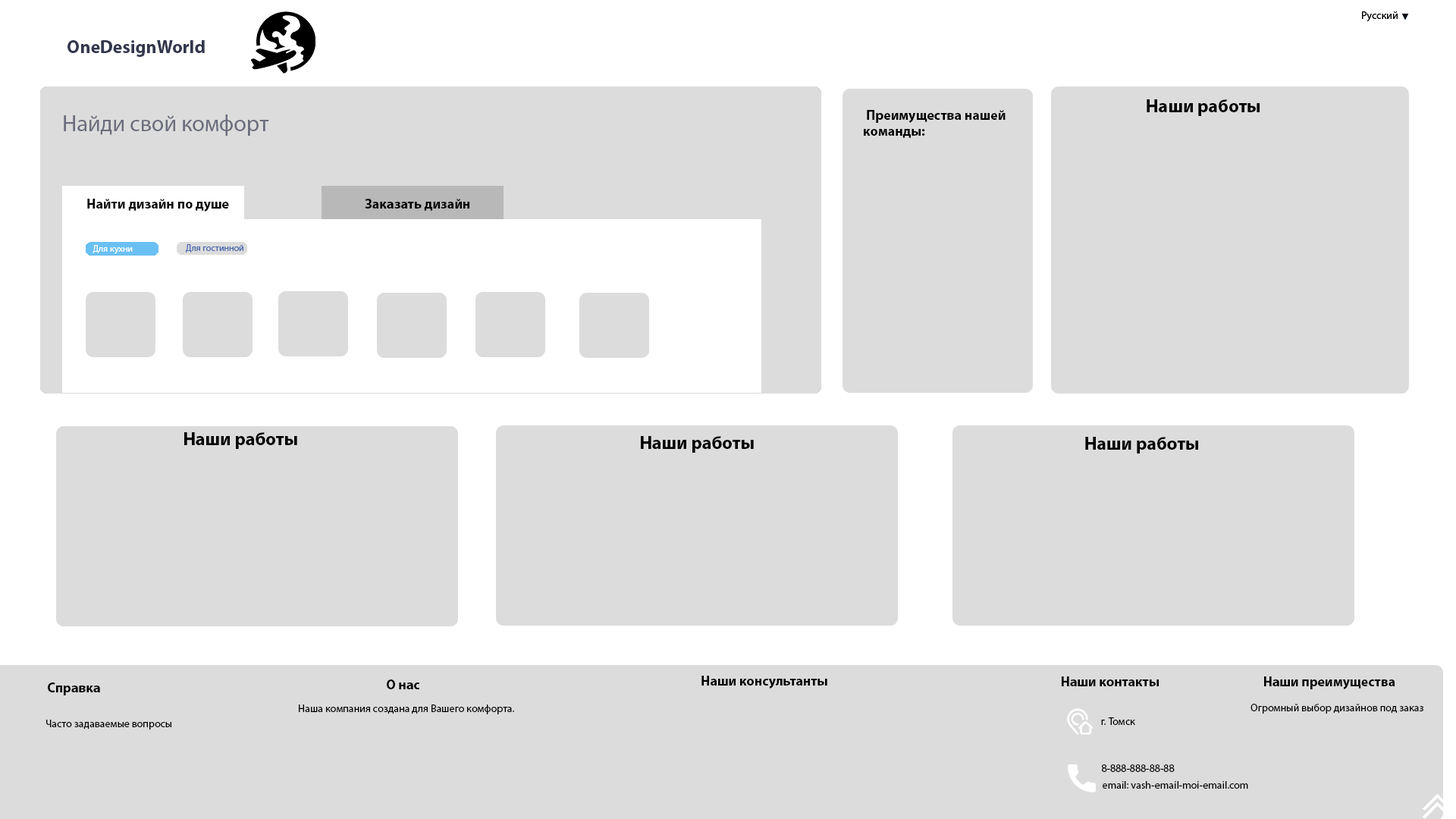
<style>
.page{position:relative;width:1456px;height:819px;background:#dcdcdc}
.page>*{position:absolute;margin:0}
.t1{font:18.2px "MyriadPro-Bold";color:#33374d}
.t2{font:18.2px "MyriadPro-Bold";color:#000000}
.t3{font:13.6px "MyriadPro-Bold";color:#000000}
.t4{font:22.7px "MyriadPro-Regular";color:#6a6d7c}
.t5{font:9.1px "MyriadPro-Regular";color:#ffffff}
.t6{font:9.1px "MyriadPro-Regular";color:#4d67ac}
.t7{font:10.6px "MyriadPro-Regular";color:#000000}
</style>
<div class="page">
<p class="t1" style="left:67px;top:40px;width:138px;height:17px">OneDesignWorld</p>
<p class="t2" style="left:1147px;top:99px;width:113px;height:17px">Наши работы</p>
<p class="t3" style="left:864px;top:110px;width:142px;height:28px">Преимущества нашей<br>команды:</p>
<p class="t4" style="left:64px;top:115px;width:205px;height:21px">Найди свой комфорт</p>
<p class="t3" style="left:87px;top:199px;width:142px;height:13px">Найти дизайн по душе</p>
<p class="t3" style="left:365px;top:199px;width:104px;height:12px">Заказать дизайн</p>
<p class="t5" style="left:93px;top:245px;width:40px;height:9px">Для кухни</p>
<p class="t6" style="left:186px;top:244px;width:57px;height:9px">Для гостинной</p>
<p class="t2" style="left:184px;top:432px;width:113px;height:17px">Наши работы</p>
<p class="t2" style="left:641px;top:436px;width:113px;height:17px">Наши работы</p>
<p class="t2" style="left:1085px;top:437px;width:113px;height:16px">Наши работы</p>
<p class="t3" style="left:701px;top:676px;width:126px;height:13px">Наши консультанты</p>
<p class="t3" style="left:1062px;top:676px;width:97px;height:10px">Наши контакты</p>
<p class="t3" style="left:1264px;top:676px;width:131px;height:13px">Наши преимущества</p>
<p class="t3" style="left:48px;top:682px;width:52px;height:13px">Справка</p>
<p class="t3" style="left:387px;top:679px;width:32px;height:10px">О нас</p>
<p class="t7" style="left:299px;top:704px;width:215px;height:10px">Наша компания создана для Вашего комфорта.</p>
<p class="t7" style="left:1250px;top:704px;width:173px;height:10px">Огромный выбор дизайнов под заказ</p>
<p class="t7" style="left:46px;top:720px;width:125px;height:10px">Часто задаваемые вопросы<br><br><br><br><br><br><br><br><br>Вакансии</p>
<p class="t7" style="left:1101px;top:717px;width:34px;height:8px">г. Томск</p>
<p class="t7" style="left:1102px;top:764px;width:73px;height:8px">8-888-888-88-88</p>
<p class="t7" style="left:1103px;top:781px;width:145px;height:8px">email: vash-email-moi-email.com</p>
</div>
